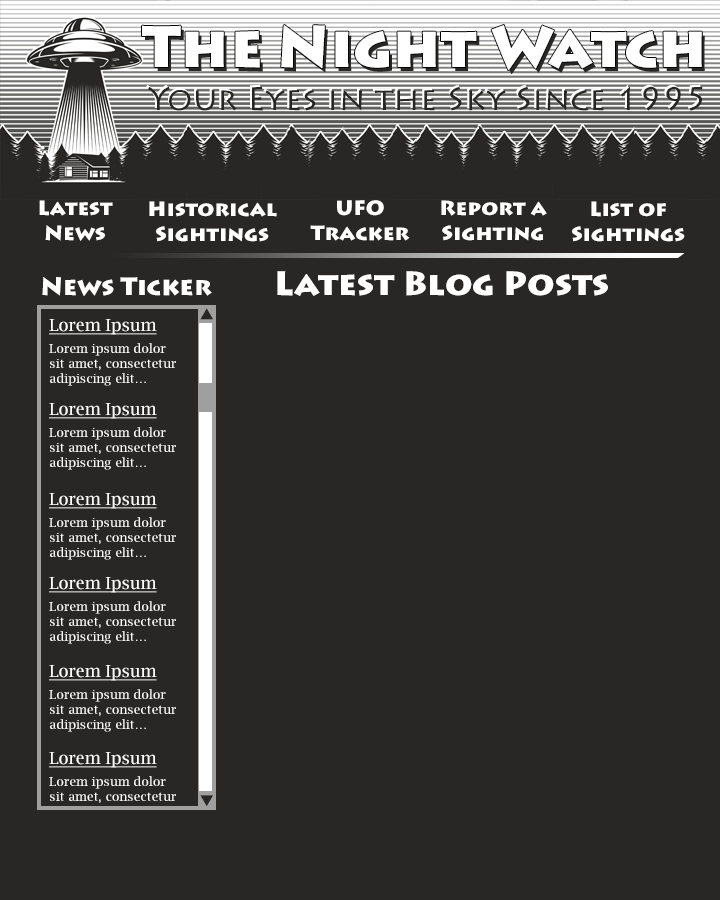
<style>
.page{position:relative;width:720px;height:900px;background:#282725}
.page>*{position:absolute;margin:0}
.t1{font:58.3px "LithosPro-Black";color:#ffffff}
.t2{font:32.7px "LithosPro-Regular";color:#282725}
.t3{font:20.8px "LithosPro-Black";color:#ffffff}
.t4{font:25px "LithosPro-Black";color:#ffffff}
.t5{font:33.3px "LithosPro-Black";color:#ffffff}
.t6{font:16.7px "LucidaBright";color:#ffffff;text-decoration:underline}
.t7{font:12.5px "LucidaBright";color:#ffffff}
</style>
<div class="page">
<p class="t1" style="left:142px;top:25px;width:560px;height:45px">The Night Watch</p>
<p class="t2" style="left:148px;top:86px;width:555px;height:25px">Your Eyes in the Sky Since 1995</p>
<p class="t3" style="left:39px;top:200px;width:74px;height:41px;text-align:center">Latest<br>News</p>
<p class="t3" style="left:149px;top:201px;width:128px;height:41px;text-align:center">Historical<br>Sightings</p>
<p class="t3" style="left:310px;top:200px;width:100px;height:41px;text-align:center">UFO<br>Tracker</p>
<p class="t3" style="left:441px;top:200px;width:106px;height:41px;text-align:center">Report a<br>Sighting</p>
<p class="t3" style="left:572px;top:201px;width:113px;height:41px;text-align:center">List of<br>Sightings</p>
<p class="t4" style="left:42px;top:277px;width:170px;height:19px">News Ticker</p>
<p class="t5" style="left:277px;top:271px;width:331px;height:25px">Latest Blog Posts</p>
<p class="t6" style="left:49px;top:319px;width:108px;height:16px">Lorem Ipsum</p>
<p class="t7" style="left:49px;top:343px;width:127px;height:43px">Lorem ipsum dolor <br>sit amet, consectetur <br>adipiscing elit…</p>
<p class="t6" style="left:49px;top:403px;width:108px;height:16px">Lorem Ipsum</p>
<p class="t7" style="left:49px;top:427px;width:127px;height:43px">Lorem ipsum dolor <br>sit amet, consectetur <br>adipiscing elit…</p>
<p class="t6" style="left:49px;top:493px;width:108px;height:16px">Lorem Ipsum</p>
<p class="t7" style="left:49px;top:517px;width:127px;height:43px">Lorem ipsum dolor <br>sit amet, consectetur <br>adipiscing elit…</p>
<p class="t6" style="left:49px;top:577px;width:108px;height:16px">Lorem Ipsum</p>
<p class="t7" style="left:49px;top:601px;width:127px;height:43px">Lorem ipsum dolor <br>sit amet, consectetur <br>adipiscing elit…</p>
<p class="t6" style="left:49px;top:665px;width:108px;height:16px">Lorem Ipsum</p>
<p class="t7" style="left:49px;top:689px;width:127px;height:43px">Lorem ipsum dolor <br>sit amet, consectetur <br>adipiscing elit…</p>
<p class="t6" style="left:49px;top:752px;width:108px;height:16px">Lorem Ipsum</p>
<p class="t7" style="left:49px;top:776px;width:127px;height:27px">Lorem ipsum dolor <br>sit amet, consectetur</p>
</div>
